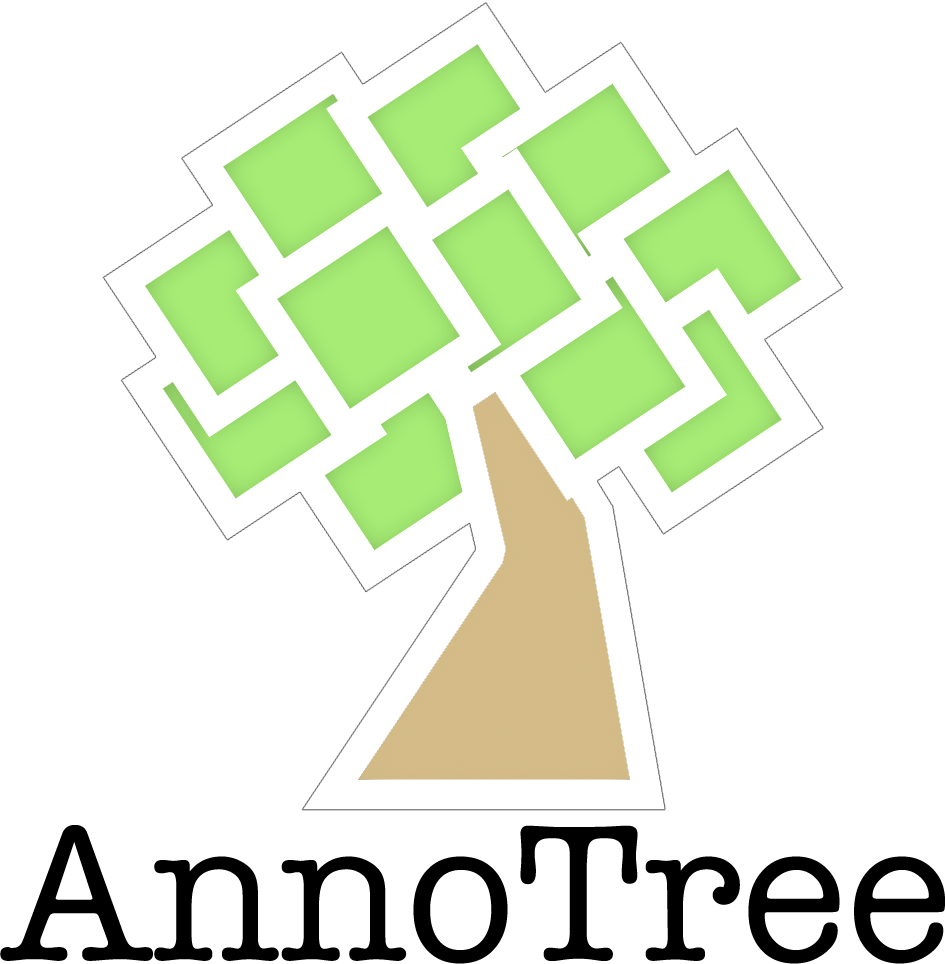
<style>
.page{position:relative;width:945px;height:964px;background:#ffffff}
.page>*{position:absolute;margin:0}
.t1{font:200px "AmericanTypewriter";color:#000000}
</style>
<div class="page">
<p class="t1" style="left:0px;top:825px;width:945px;height:139px">AnnoTree</p>
</div>
